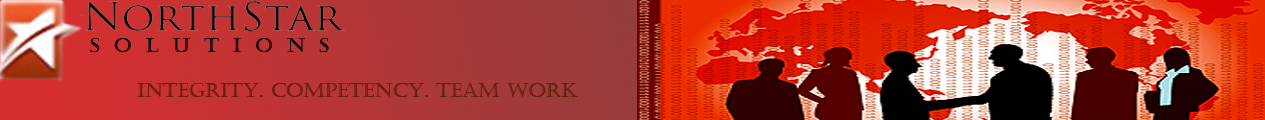
<style>
.page{position:relative;width:1265px;height:120px}
.page>*{position:absolute;margin:0}
.t1{font:20px "Castellar";color:#000000}
.t2{font:20px "Castellar";color:#63200a}
</style>
<div class="page">
<p class="t1" style="left:90px;top:38px;width:239px;height:14px">S  O  L  U  T  I  O  N  S</p>
<p class="t2" style="left:137px;top:83px;width:441px;height:14px">Integrity. Competency. team work</p>
</div>
